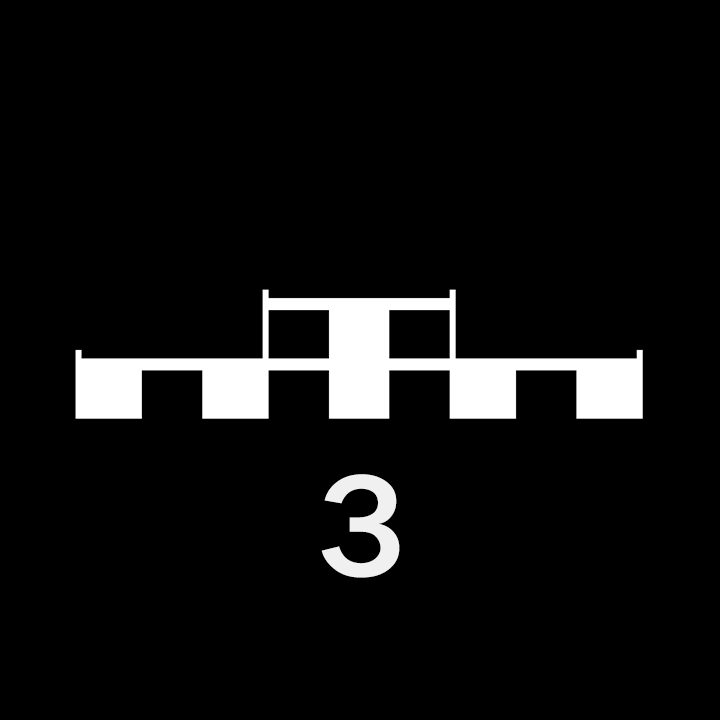
<style>
.page{position:relative;width:720px;height:720px;background:#000000}
.page>*{position:absolute;margin:0}
.t1{font:150px "FranklinGothic-Medium";letter-spacing:0.1em;color:#f0f0f0}
</style>
<div class="page">
<p class="t1" style="left:321px;top:474px;width:79px;height:104px">3</p>
</div>
